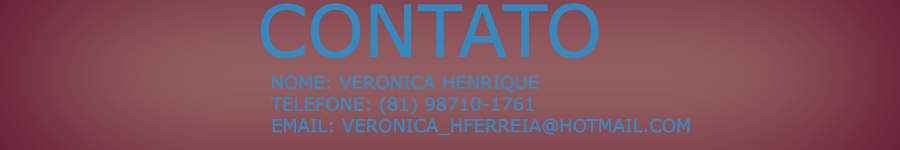
<style>
.page{position:relative;width:900px;height:150px}
.page>*{position:absolute;margin:0}
.t1{font:72px "Verdana";color:#328ac2}
.t2{font:18px "Verdana";color:#328ac2}
</style>
<div class="page">
<p class="t1" style="left:261px;top:3px;width:338px;height:56px">CONTATO</p>
<p class="t2" style="left:271px;top:75px;width:419px;height:60px">NOME: VERONICA HENRIQUE<br>TELEFONE: (81) 98710-1761<br>EMAIL: VERONICA_HFERREIA@HOTMAIL.COM</p>
</div>
